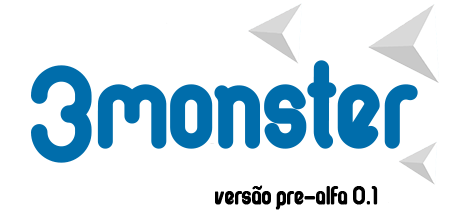
<style>
.page{position:relative;width:450px;height:221px;background:#ffffff}
.page>*{position:absolute;margin:0}
.t1{font:135.1px "Bobel";color:#006dab;font-weight:bold}
.t2{font:121px "Bobel";color:#006dab;font-weight:bold}
</style>
<div class="page">
<p class="t1" style="left:31px;top:65px;width:61px;height:98px">3</p>
<p class="t2" style="left:97px;top:60px;width:321px;height:89px">monster</p>
</div>
